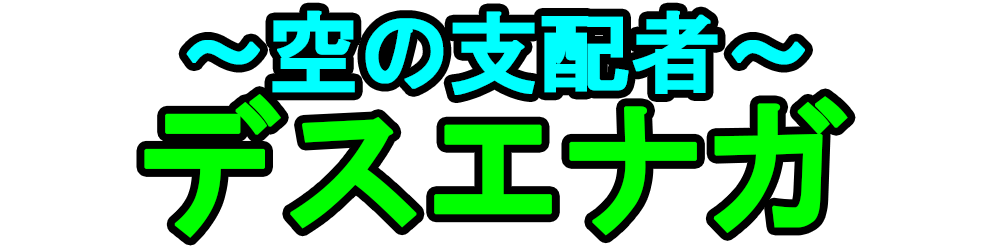
<style>
.page{position:relative;width:1000px;height:250px;background:#ffffff}
.page>*{position:absolute;margin:0}
.t1{font:88.7px "HGPGothicE";color:#00ffff;font-weight:bold}
.t2{font:146.7px "HGPGothicE";color:#00ff00;font-weight:bold}
</style>
<div class="page">
<p class="t1" style="left:186px;top:10px;width:619px;height:85px">～空の支配者～</p>
<p class="t2" style="left:144px;top:94px;width:704px;height:144px">デスエナガ</p>
</div>
